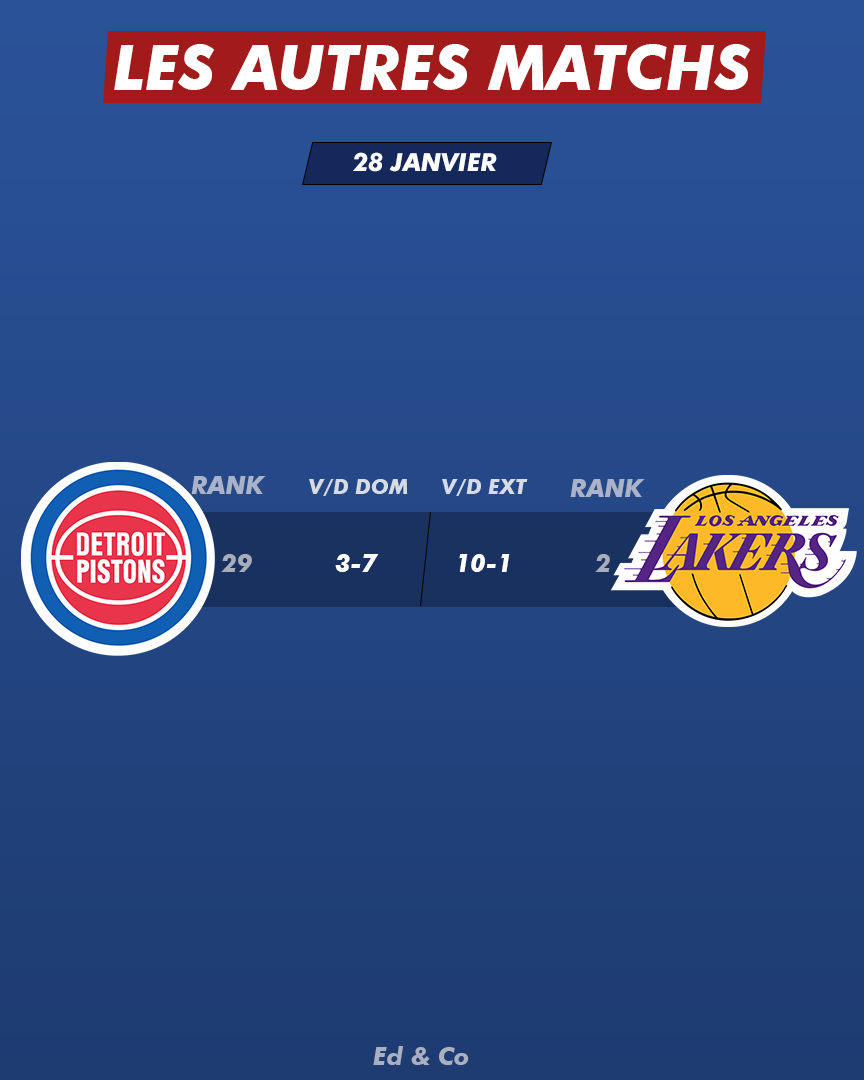
<style>
.page{position:relative;width:864px;height:1080px}
.page>*{position:absolute;margin:0}
.t1{font:25px "FuturaBT-BoldItalic";color:#ffffff}
.t2{font:25px "FuturaBT-BoldItalic";color:#aab3c9}
.t3{font:20.8px "FuturaBT-BoldItalic";color:#d7dbe5}
.t4{font:25px "FuturaBT-BoldItalic";color:#a8adbb}
.t5{font:25px "FuturaBT-BoldItalic";color:#a9b0c1}
</style>
<div class="page">
<p class="t1" style="left:353px;top:152px;width:144px;height:20px">28 JANVIER</p>
<p class="t2" style="left:191px;top:476px;width:75px;height:18px">RANK</p>
<p class="t3" style="left:309px;top:479px;width:99px;height:17px">V/D DOM</p>
<p class="t3" style="left:442px;top:479px;width:86px;height:17px">V/D EXT</p>
<p class="t2" style="left:570px;top:479px;width:75px;height:18px">RANK</p>
<p class="t4" style="left:221px;top:554px;width:31px;height:18px">29</p>
<p class="t1" style="left:335px;top:554px;width:44px;height:18px">3-7</p>
<p class="t1" style="left:459px;top:554px;width:51px;height:18px">10-1</p>
<p class="t4" style="left:595px;top:554px;width:15px;height:18px">2</p>
<p class="t5" style="left:373px;top:1046px;width:96px;height:19px">Ed &amp; Co</p>
</div>
